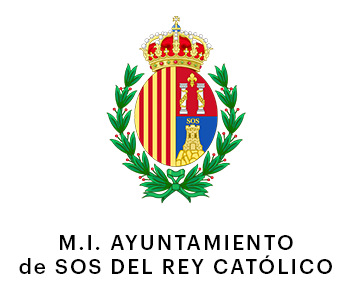
<style>
.page{position:relative;width:350px;height:300px;background:#ffffff}
.page>*{position:absolute;margin:0}
.t1{font:20.6px "Graphik-Medium";letter-spacing:0.1em;color:#000000}
</style>
<div class="page">
<p class="t1" style="left:19px;top:235px;width:313px;height:39px;text-align:center">M.I. AYUNTAMIENTO<br>de SOS DEL REY CATÓLICO</p>
</div>
